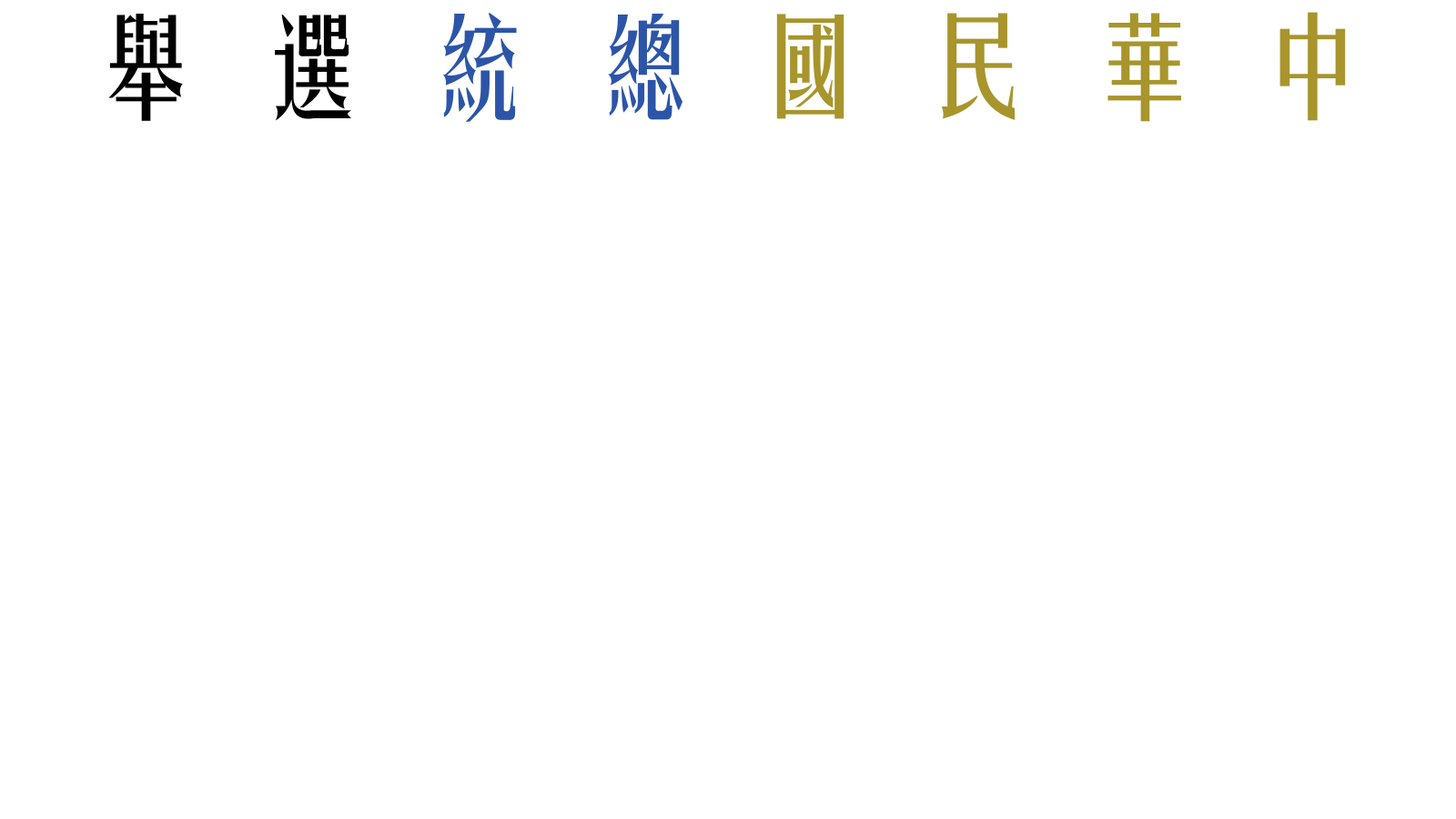
<style>
.page{position:relative;width:1456px;height:819px;background:#ffffff}
.page>*{position:absolute;margin:0}
.t1{font:110.9px "FZYTK--GBK1-0";color:#a8952c}
.t2{font:110.9px "FZYTK--GBK1-0";color:#010101}
.t3{font:110.9px "FZYTK--GBK1-0";color:#2c55a8}
</style>
<div class="page">
<p class="t1" style="left:108px;top:12px;width:1238px;height:110px"><span class="t2">舉  選  </span><span class="t3">統  總</span>  國  民  華  中</p>
</div>
